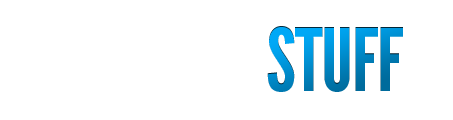
<style>
.page{position:relative;width:453px;height:120px;background:#ffffff}
.page>*{position:absolute;margin:0}
.t1{font:87.6px "LeagueGothic";letter-spacing:-0.015em;text-transform:uppercase}
</style>
<div class="page">
<p class="t1" style="left:267px;top:26px;width:136px;height:66px">Stuff</p>
</div>
